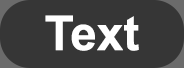
<style>
.page{position:relative;width:184px;height:68px;background:#363636}
.page>*{position:absolute;margin:0}
.t1{font:48px "Arial-BoldMT";color:#ffffff}
</style>
<div class="page">
<p class="t1" style="left:45px;top:15px;width:94px;height:36px">Text</p>
</div>
